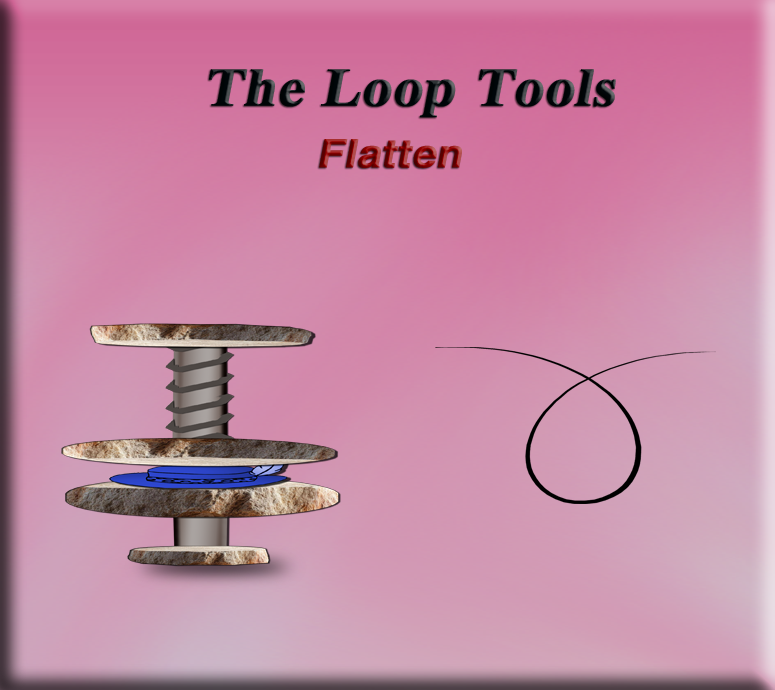
<style>
.page{position:relative;width:775px;height:690px}
.page>*{position:absolute;margin:0}
.t1{font:53.9px "TimesNewRomanPS-BoldMT";color:#000609;font-weight:bold;font-style:italic;scale:1.08 1}
.t2{font:39.1px "HelveticaLTStd-Bold";font-weight:bold;font-style:italic;scale:1.08 1}
.t3{font:53.9px "TimesNewRomanPS-BoldMT";font-weight:bold;font-style:italic;scale:1.08 1}
</style>
<div class="page">
<p class="t1" style="left:209px;top:69px;width:407px;height:49px">The Loop Tools</p>
<p class="t2" style="left:319px;top:139px;width:143px;height:29px"><span class="t3"> </span>Flatten</p>
</div>
